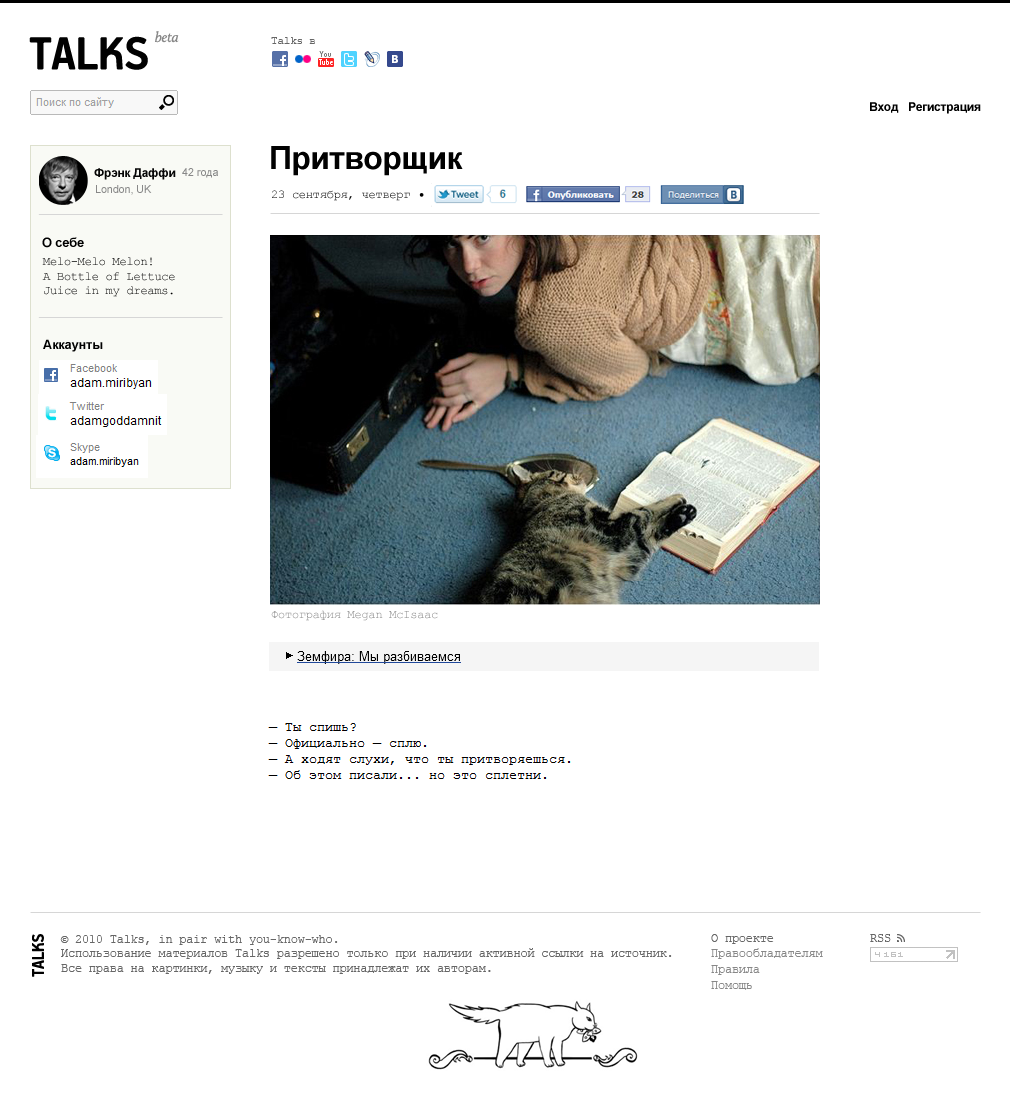
<style>
.page{position:relative;width:1010px;height:1100px;background:#ffffff}
.page>*{position:absolute;margin:0}
.t1{font:52px "PFHandbookPro-Bold";letter-spacing:-0.02em;color:#010101}
.t2{font:14.6px "Calluna-It";letter-spacing:-0.02em;color:#888888}
.t3{font:11px "CourierNewPSMT";letter-spacing:-0.02em;color:#666666}
.t4{font:12px "Arial-BoldMT";letter-spacing:-0.02em;color:#000000}
.t5{font:32px "Arial-BoldMT";letter-spacing:-0.02em;color:#010101}
.t6{font:12px "Arial-BoldMT";letter-spacing:-0.02em;color:#060606}
.t7{font:11px "ArialMT";letter-spacing:-0.02em;color:#888888}
.t8{font:12px "CourierNewPSMT";letter-spacing:-0.02em}
.t9{font:12px "Calluna-Bold";letter-spacing:-0.02em;color:#010101}
.t10{font:13px "Arial-BoldMT";letter-spacing:-0.02em;color:#000000}
.t11{font:12px "CourierNewPSMT";letter-spacing:-0.02em;color:#000000}
.t12{font:12px "CourierNewPSMT";letter-spacing:-0.02em;color:#888888}
.t13{font:18.8px "PFHandbookPro-Bold";letter-spacing:-0.02em;color:#000000}
.t14{font:12px "CourierNewPSMT";letter-spacing:-0.02em;color:#666666}
</style>
<div class="page">
<p class="t1" style="left:29px;top:36px;width:119px;height:34px">TALKS</p>
<p class="t2" style="left:155px;top:31px;width:24px;height:12px">beta</p>
<p class="t3" style="left:271px;top:37px;width:44px;height:7px">Talks в</p>
<p class="t4" style="left:870px;top:102px;width:29px;height:11px">Вход</p>
<p class="t4" style="left:909px;top:102px;width:72px;height:12px">Регистрация</p>
<p class="t5" style="left:271px;top:146px;width:192px;height:30px">Притворщик</p>
<p class="t6" style="left:94px;top:168px;width:82px;height:12px">Фрэнк Даффи</p>
<p class="t7" style="left:182px;top:168px;width:36px;height:10px">42 года</p>
<p class="t7" style="left:96px;top:185px;width:56px;height:10px">London, UK</p>
<p class="t8" style="left:272px;top:190px;width:138px;height:11px">23 сентября, четверг</p>
<p class="t9" style="left:419px;top:193px;width:5px;height:4px">•</p>
<p class="t10" style="left:42px;top:237px;width:42px;height:11px">О себе</p>
<p class="t11" style="left:42px;top:257px;width:133px;height:40px">Melo-Melo Melon!<br>A Bottle of Lettuce Juice in my dreams.</p>
<p class="t10" style="left:43px;top:339px;width:60px;height:13px">Аккаунты</p>
<p class="t12" style="left:271px;top:610px;width:167px;height:11px">Фотография Megan McIsaac</p>
<p class="t13" style="left:32px;top:934px;width:12px;height:43px;rotate:-90deg">TALKS</p>
<p class="t14" style="left:60px;top:935px;width:612px;height:39px">© 2010 Talks, in pair with you-know-who.<br>Использование материалов Talks разрешено только при наличии активной ссылки на источник.<br>Все права на картинки, музыку и тексты принадлежат их авторам.</p>
<p class="t14" style="left:711px;top:934px;width:63px;height:10px">О проекте</p>
<p class="t14" style="left:870px;top:934px;width:21px;height:8px">RSS</p>
<p class="t12" style="left:711px;top:948px;width:112px;height:11px">Правообладателям</p>
<p class="t12" style="left:711px;top:965px;width:49px;height:10px">Правила</p>
<p class="t12" style="left:711px;top:981px;width:41px;height:9px">Помощь</p>
</div>
